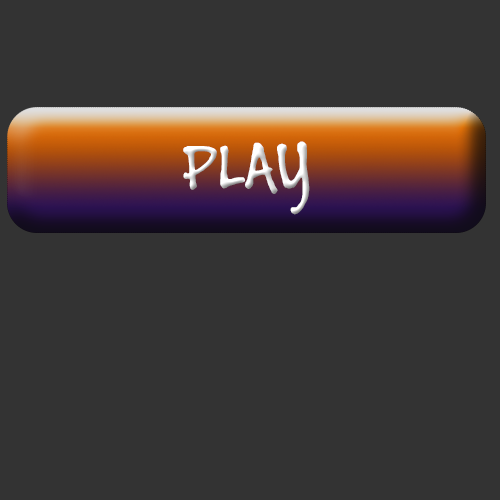
<style>
.page{position:relative;width:500px;height:500px;background:#333333}
.page>*{position:absolute;margin:0}
.t1{font:70.6px "BuxtonSketch"}
.t2{font:52.9px "CopperplateGothic-Light"}
</style>
<div class="page">
<p class="t1" style="left:183px;top:141px;width:127px;height:74px"><span class="t2">           </span>PLAY</p>
</div>
